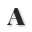
<style>
.page{position:relative;width:32px;height:32px;background:#ffffff}
.page>*{position:absolute;margin:0}
.t1{font:25px "PlayfairDisplay-Black";letter-spacing:0.2em;color:#272727}
</style>
<div class="page">
<p class="t1" style="left:7px;top:8px;width:18px;height:17px">A</p>
</div>
